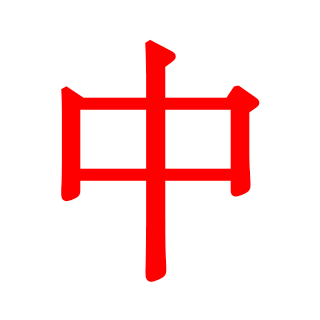
<style>
.page{position:relative;width:320px;height:320px;background:#ffffff}
.page>*{position:absolute;margin:0}
.t1{font:250px "AdobeSongStd-Light";letter-spacing:0.2em;color:#ff0000;font-weight:bold}
</style>
<div class="page">
<p class="t1" style="left:61px;top:39px;width:199px;height:243px">中</p>
</div>
